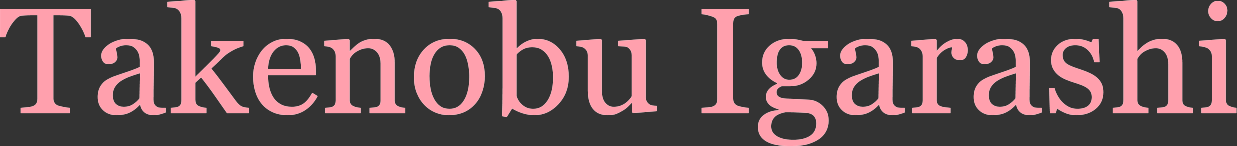
<style>
.page{position:relative;width:1237px;height:146px;background:#333333}
.page>*{position:absolute;margin:0}
.t1{font:150px "Georgia";color:#ffa0ad}
</style>
<div class="page">
<p class="t1" style="left:0px;top:0px;width:1237px;height:146px">Takenobu Igarashi</p>
</div>
